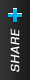
<style>
.page{position:relative;width:30px;height:80px}
.page>*{position:absolute;margin:0}
.t1{font:12.5px "EurostileRegular";letter-spacing:0.075em;color:#ffffff;text-transform:uppercase;font-weight:bold;font-style:italic}
</style>
<div class="page">
<p class="t1" style="left:10px;top:28px;width:10px;height:44px;rotate:-90deg">share</p>
</div>
